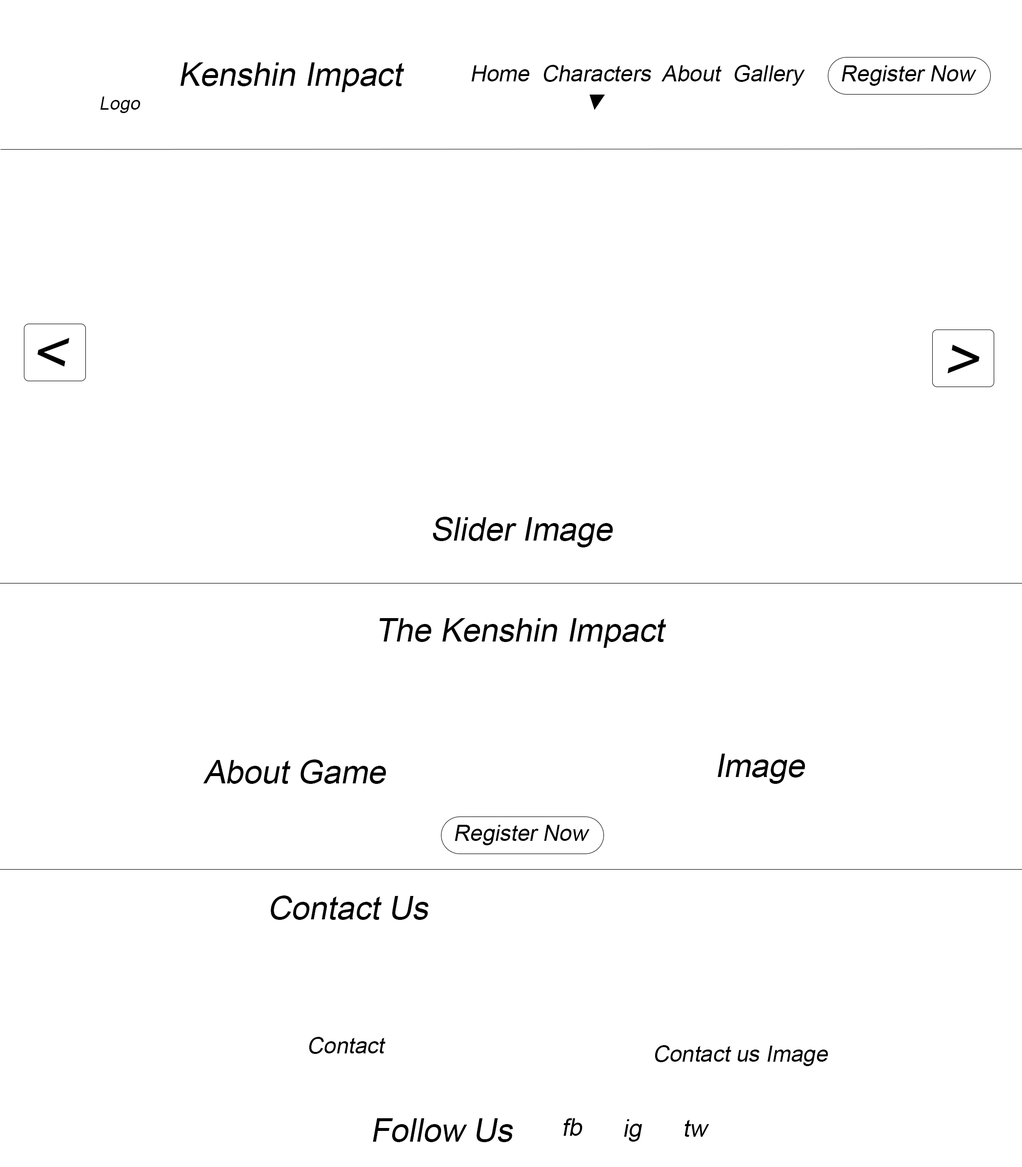
<style>
.page{position:relative;width:1022px;height:1167px;background:#ffffff}
.page>*{position:absolute;margin:0}
.t1{font:32.4px "ArialMT";color:#000000;font-style:italic}
.t2{font:22.3px "ArialMT";color:#000000;font-style:italic}
.t3{font:18.2px "ArialMT";color:#000000;font-style:italic}
.t4{font:60.8px "ArialMT";color:#000000;font-style:italic}
.t5{font:24.3px "ArialMT";color:#000000;font-style:italic}
</style>
<div class="page">
<p class="t1" style="left:180px;top:62px;width:224px;height:30px">Kenshin Impact</p>
<p class="t2" style="left:471px;top:65px;width:334px;height:21px">Home  Characters  About  Gallery</p>
<p class="t2" style="left:841px;top:65px;width:135px;height:21px">Register Now</p>
<p class="t3" style="left:100px;top:97px;width:40px;height:16px">Logo</p>
<p class="t2" style="left:589px;top:95px;width:16px;height:15px">▼</p>
<p class="t4" style="left:37px;top:338px;width:33px;height:29px">&lt;</p>
<p class="t4" style="left:947px;top:345px;width:32px;height:29px">&gt;</p>
<p class="t1" style="left:433px;top:517px;width:180px;height:31px">Slider Image</p>
<p class="t1" style="left:379px;top:618px;width:287px;height:30px">The Kenshin Impact</p>
<p class="t1" style="left:203px;top:760px;width:183px;height:24px">About Game</p>
<p class="t1" style="left:717px;top:754px;width:88px;height:30px">Image</p>
<p class="t2" style="left:454px;top:825px;width:136px;height:20px">Register Now</p>
<p class="t1" style="left:271px;top:896px;width:158px;height:24px">Contact Us</p>
<p class="t2" style="left:309px;top:1037px;width:76px;height:17px">Contact</p>
<p class="t2" style="left:654px;top:1045px;width:173px;height:21px">Contact us Image</p>
<p class="t1" style="left:373px;top:1119px;width:140px;height:23px">Follow Us</p>
<p class="t5" style="left:563px;top:1119px;width:19px;height:17px">fb</p>
<p class="t5" style="left:624px;top:1120px;width:18px;height:22px">ig</p>
<p class="t5" style="left:684px;top:1120px;width:25px;height:17px">tw</p>
</div>
